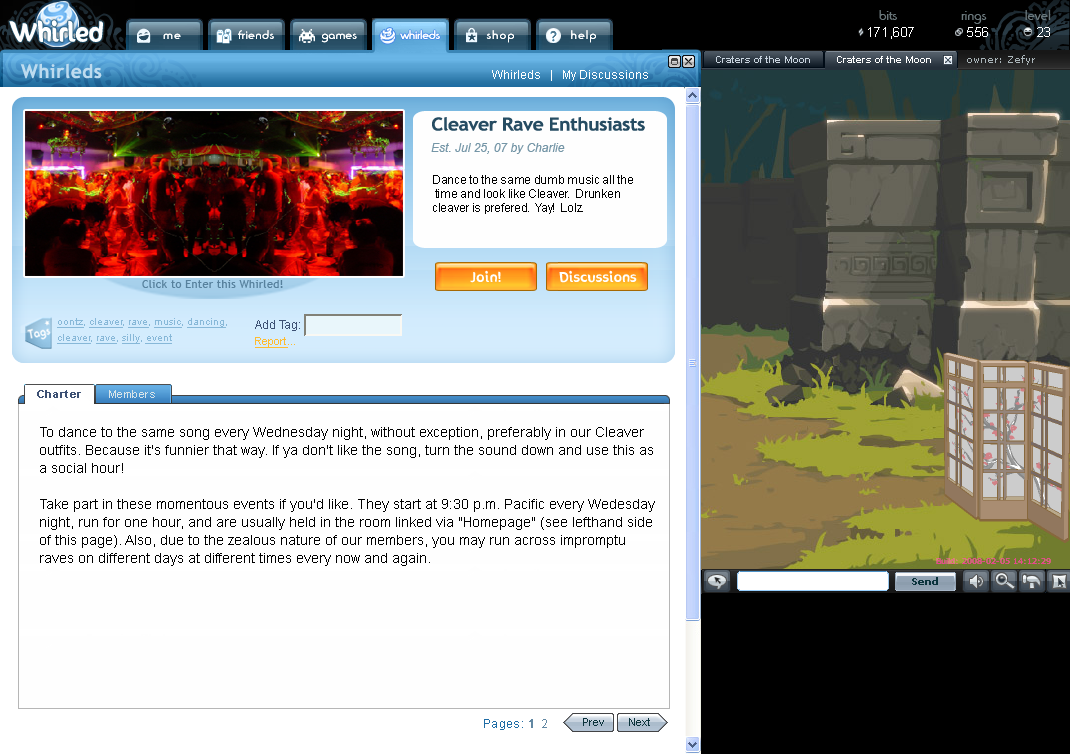
<style>
.page{position:relative;width:1070px;height:754px;background:#fefefe}
.page>*{position:absolute;margin:0}
.t1{font:14px "BlippoLightSF";letter-spacing:0.015em;color:#6a787c}
.t2{font:22.8px "SunnySide";color:#ffffff}
.t3{font:12px "BlippoLightSF";letter-spacing:0.1em;color:#ffffff;scale:1.07 1}
.t4{font:12px "BlippoLightSF";letter-spacing:0.05em;color:#ffffff;scale:1.07 1}
.t5{font:12px "BlippoLightSF";letter-spacing:0.025em;color:#ffffff;scale:1.07 1}
.t6{font:12px "BlippoLightSF";color:#ffffff;scale:1.07 1}
.t7{font:13px "ArialMT";letter-spacing:0.025em;color:#ffffff}
.t8{font:19px "TrebuchetMS-Bold";letter-spacing:0.025em;color:#bddbef}
.t9{font:12px "ArialMT";color:#ffffff}
.t10{font:18px "TrebuchetMS-Bold";letter-spacing:-0.025em;color:#264c62;scale:1.07 1}
.t11{font:12px "Arial-ItalicMT";color:#7596a7}
.t12{font:12px/14px "ArialMT";letter-spacing:-0.025em;color:#000000}
.t13{font:12px "SunnySide";letter-spacing:0.05em;color:#ffffff;scale:1.07 1}
.t14{font:12px "SunnySide";letter-spacing:0.025em;color:#ffffff;scale:1.07 1}
.t15{font:11px "TrebuchetMS";letter-spacing:0.025em;color:#57819d}
.t16{font:10px/16px "ArialMT";color:#87b8d8;text-decoration:underline}
.t17{font:10px/16px "ArialMT";color:#87b8d8}
.t18{font:12px/16px "ArialMT";color:#3d5174}
.t19{font:11px/16px "ArialMT";color:#ffbc30;text-decoration:underline}
.t20{font:11px/16px "ArialMT";color:#ffbc30}
.t21{font:11px "Arial-BoldMT";letter-spacing:0.05em;color:#3d5174}
.t22{font:11px "ArialMT";letter-spacing:0.05em;color:#d7e4e9}
.t23{font:14px/18px "ArialMT";color:#000000}
.t24{font:12px "ArialMT";letter-spacing:0.025em;color:#1f6da6}
.t25{font:12px "ArialMT";letter-spacing:0.12em;color:#1f6da6}
.t26{font:12px "ArialMT";letter-spacing:0.12em;color:#6288a3;font-weight:bold}
.t27{font:12px "ArialMT";letter-spacing:0.12em;color:#6288a3}
</style>
<div class="page">
<p class="t1" style="left:879px;top:10px;width:172px;height:14px">bits               rings         level</p>
<p class="t2" style="left:9px;top:20px;width:94px;height:22px">Whirled</p>
<p class="t2" style="left:9px;top:20px;width:94px;height:22px">Whirled</p>
<p class="t3" style="left:163px;top:30px;width:433px;height:13px">me               <span class="t4">friends             </span><span class="t5">games            </span><span class="t6">whirleds             </span>shop               help</p>
<p class="t3" style="left:163px;top:30px;width:433px;height:13px">me               <span class="t4">friends             </span><span class="t5">games            </span><span class="t6">whirleds             </span>shop               help</p>
<p class="t3" style="left:163px;top:30px;width:433px;height:13px">me               <span class="t4">friends             </span><span class="t5">games            </span><span class="t6">whirleds             </span>shop               help</p>
<p class="t3" style="left:163px;top:30px;width:433px;height:13px">me               <span class="t4">friends             </span><span class="t5">games            </span><span class="t6">whirleds             </span>shop               help</p>
<p class="t7" style="left:868px;top:27px;width:182px;height:12px">171,607            556           23</p>
<p class="t8" style="left:21px;top:63px;width:81px;height:16px">Whirleds</p>
<p class="t9" style="left:492px;top:70px;width:156px;height:11px">Whirleds   |   My Discussions</p>
<p class="t10" style="left:432px;top:117px;width:213px;height:14px">Cleaver Rave Enthusiasts</p>
<p class="t11" style="left:431px;top:143px;width:134px;height:11px">Est. Jul 25, 07 by Charlie</p>
<p class="t12" style="left:433px;top:175px;width:200px;height:39px">Dance to the same dumb music all the<br> time and look like Cleaver.  Drunken <br>cleaver is prefered.  Yay!  Lolz.</p>
<p class="t13" style="left:470px;top:270px;width:31px;height:13px">Join!</p>
<p class="t14" style="left:559px;top:270px;width:78px;height:13px">Discussions</p>
<p class="t15" style="left:142px;top:280px;width:141px;height:8px">Click to Enter this Whirled!</p>
<p class="t16" style="left:57px;top:318px;width:170px;height:26px">oontz<span class="t17">, </span>cleaver<span class="t17">, </span>rave<span class="t17">, </span>music<span class="t17">, </span>dancing<span class="t17">, <br></span>cleaver<span class="t17">, </span>rave<span class="t17">, </span>silly<span class="t17">, </span>event</p>
<p class="t18" style="left:255px;top:320px;width:45px;height:28px">Add Tag:                                    <br><span class="t19">Report</span><span class="t20">...</span></p>
<p class="t21" style="left:37px;top:390px;width:44px;height:8px">Charter</p>
<p class="t22" style="left:109px;top:390px;width:46px;height:8px">Members</p>
<p class="t23" style="left:40px;top:427px;width:615px;height:139px">To dance to the same song every Wednesday night, without exception, preferably in our Cleaver outfits. Because it's funnier that way. If ya don't like the song, turn the sound down and use this as a social hour!<br><br>Take part in these momentous events if you'd like. They start at 9:30 p.m. Pacific every Wedesday night, run for one hour, and are usually held in the room linked via "Homepage" (see lefthand side of this page). Also, due to the zealous nature of our members, you may run across impromptu raves on different days at different times every now and again.</p>
<p class="t24" style="left:484px;top:719px;width:39px;height:11px">Pages<span class="t25">:</span></p>
<p class="t26" style="left:529px;top:719px;width:18px;height:9px">1<span class="t27"> 2</span></p>
</div>
